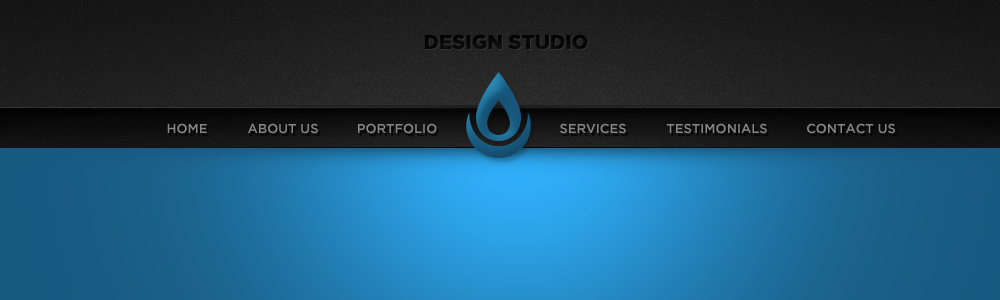
<style>
.page{position:relative;width:1000px;height:300px}
.page>*{position:absolute;margin:0}
.t1{font:20px "GothamBlack";color:#070707}
.t2{font:13px "GothamMedium";color:#878787}
</style>
<div class="page">
<p class="t1" style="left:425px;top:34px;width:163px;height:16px">DESIGN STUDIO</p>
<p class="t2" style="left:167px;top:123px;width:40px;height:11px">HOME</p>
<p class="t2" style="left:248px;top:123px;width:70px;height:11px">ABOUT US</p>
<p class="t2" style="left:358px;top:123px;width:79px;height:11px">PORTFOLIO</p>
<p class="t2" style="left:560px;top:123px;width:66px;height:11px">SERVICES</p>
<p class="t2" style="left:666px;top:123px;width:101px;height:11px">TESTIMONIALS</p>
<p class="t2" style="left:807px;top:123px;width:88px;height:11px">CONTACT US</p>
</div>
